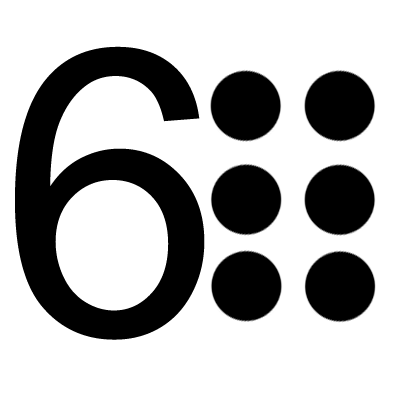
<style>
.page{position:relative;width:400px;height:400px;background:#ffffff}
.page>*{position:absolute;margin:0}
.t1{font:400.2px "ArialMT";color:#000000}
</style>
<div class="page">
<p class="t1" style="left:15px;top:46px;width:190px;height:294px">6</p>
</div>
